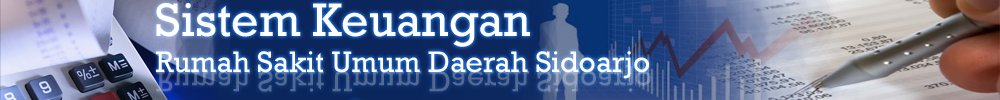
<style>
.page{position:relative;width:1000px;height:100px}
.page>*{position:absolute;margin:0}
.t1{font:30px "Rockwell";color:#ffffff}
.t2{font:48px "Rockwell";color:#ffffff}
</style>
<div class="page">
<p class="t1" style="left:156px;top:3px;width:493px;height:76px"><span class="t2">Sistem Keuangan<br></span>Rumah Sakit Umum Daerah Sidoarjo</p>
</div>
